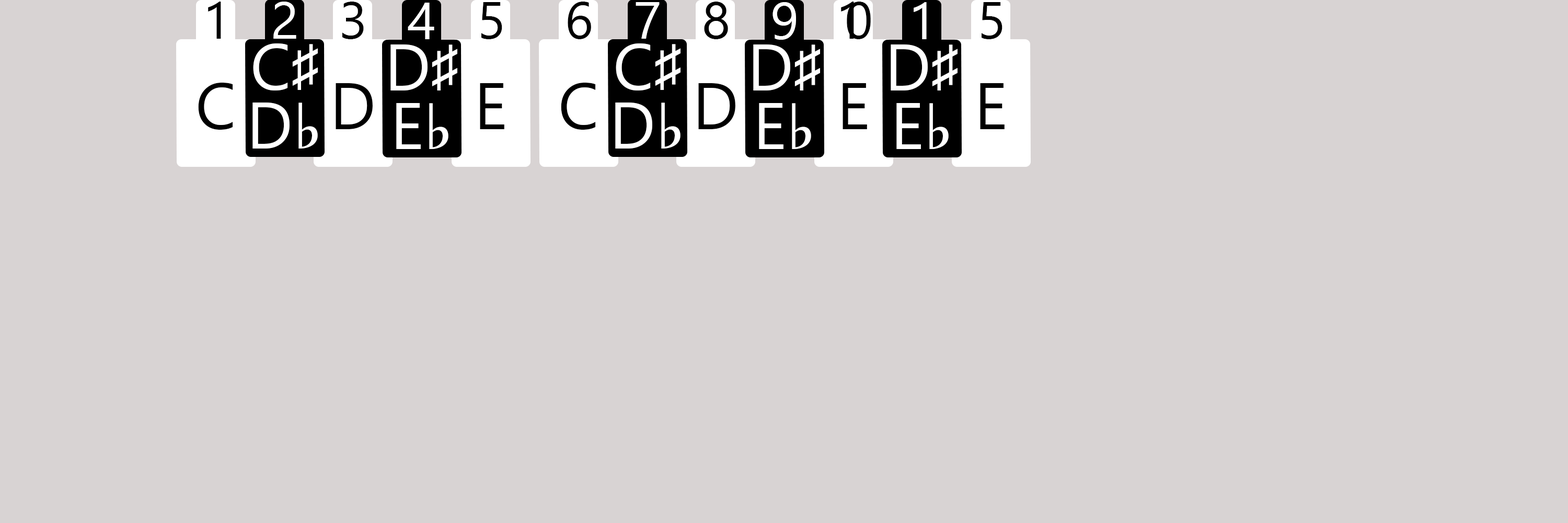
<style>
.page{position:relative;width:1568px;height:523px;background:#d8d3d3}
.page>*{position:absolute;margin:0}
.t1{font:52.3px "SegoeUISymbol";color:#000000}
.t2{font:52.3px "SegoeUISymbol";color:#ffffff}
.t3{font:52.3px "SegoeUISymbol";letter-spacing:-0.36em;color:#000000}
.t4{font:65.3px "SegoeUISymbol";color:#ffffff}
.t5{font:65.3px "SegoeUISymbol";color:#000000}
</style>
<div class="page">
<p class="t1" style="left:208px;top:2px;width:13px;height:37px">1</p>
<p class="t2" style="left:273px;top:2px;width:23px;height:37px">2</p>
<p class="t1" style="left:342px;top:2px;width:22px;height:37px">3</p>
<p class="t2" style="left:408px;top:3px;width:26px;height:36px">4</p>
<p class="t1" style="left:481px;top:2px;width:21px;height:37px">5</p>
<p class="t1" style="left:568px;top:2px;width:23px;height:37px">6</p>
<p class="t2" style="left:636px;top:2px;width:24px;height:37px">7</p>
<p class="t1" style="left:704px;top:2px;width:24px;height:37px">8</p>
<p class="t2" style="left:773px;top:2px;width:23px;height:38px">9</p>
<p class="t3" style="left:841px;top:2px;width:30px;height:37px">10</p>
<p class="t2" style="left:914px;top:2px;width:13px;height:37px">11</p>
<p class="t1" style="left:982px;top:2px;width:20px;height:37px">5</p>
<p class="t4" style="left:253px;top:43px;width:65px;height:47px">C♯</p>
<p class="t4" style="left:390px;top:44px;width:67px;height:46px">D♯</p>
<p class="t4" style="left:616px;top:43px;width:65px;height:47px">C♯</p>
<p class="t4" style="left:753px;top:44px;width:67px;height:46px">D♯</p>
<p class="t4" style="left:891px;top:44px;width:67px;height:46px">D♯</p>
<p class="t5" style="left:198px;top:83px;width:35px;height:47px">C</p>
<p class="t5" style="left:336px;top:83px;width:37px;height:46px">D</p>
<p class="t5" style="left:480px;top:83px;width:24px;height:46px">E</p>
<p class="t5" style="left:561px;top:83px;width:35px;height:47px">C</p>
<p class="t5" style="left:698px;top:83px;width:37px;height:46px">D</p>
<p class="t5" style="left:843px;top:83px;width:24px;height:46px">E</p>
<p class="t5" style="left:980px;top:83px;width:25px;height:46px">E</p>
<p class="t4" style="left:252px;top:102px;width:66px;height:46px">D♭</p>
<p class="t4" style="left:396px;top:103px;width:52px;height:46px">E♭</p>
<p class="t4" style="left:615px;top:102px;width:66px;height:46px">D♭</p>
<p class="t4" style="left:759px;top:103px;width:52px;height:46px">E♭</p>
<p class="t4" style="left:896px;top:103px;width:53px;height:46px">E♭</p>
</div>
